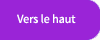
<style>
.page{position:relative;width:100px;height:40px;background:#9a24d7}
.page>*{position:absolute;margin:0}
.t1{font:12px "SourceSansPro-Regular";color:#ffffff}
</style>
<div class="page">
<p class="t1" style="left:17px;top:14px;width:59px;height:10px">Vers le haut</p>
</div>
